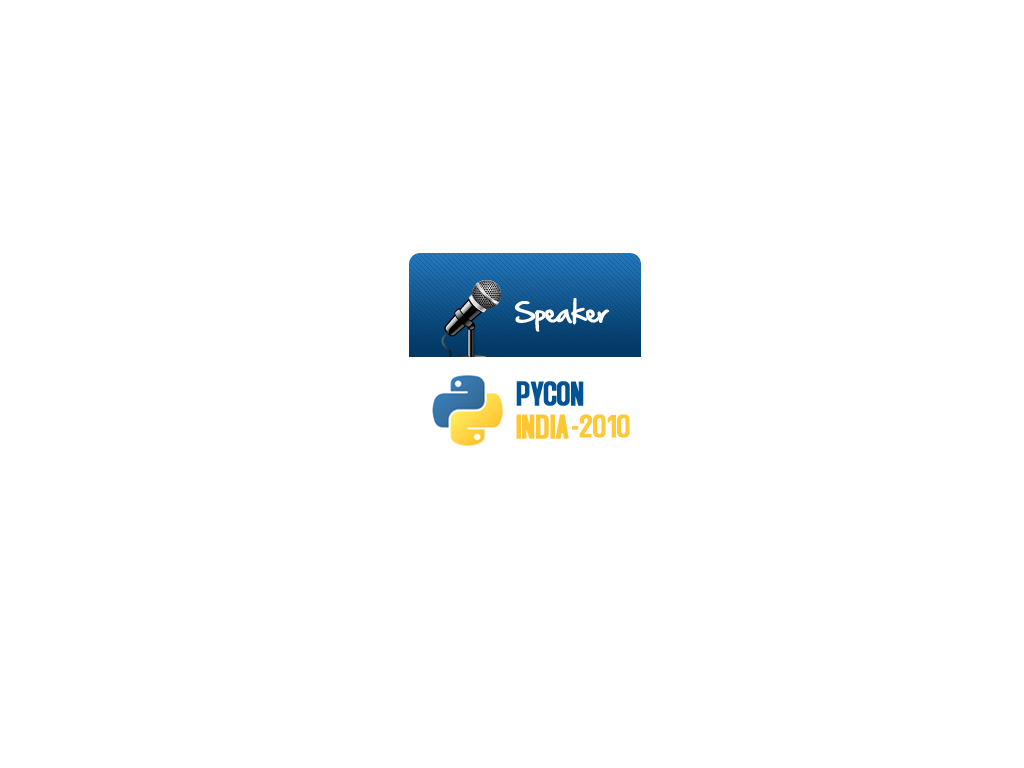
<style>
.page{position:relative;width:1024px;height:768px;background:#ffffff}
.page>*{position:absolute;margin:0}
.t1{font:24px "HandOfSean";letter-spacing:-0.025em;color:#ffffff}
.t2{font:36px "AccidentalPresidency";letter-spacing:-0.025em;color:#025296;text-transform:uppercase;font-weight:bold}
.t3{font:36px "AccidentalPresidency";letter-spacing:-0.025em;color:#ffc634;text-transform:uppercase;font-weight:bold}
.t4{font:36px "AccidentalPresidency";letter-spacing:-0.025em;color:#ffc837;text-transform:uppercase;font-weight:bold}
</style>
<div class="page">
<p class="t1" style="left:514px;top:298px;width:96px;height:34px">Speaker</p>
<p class="t2" style="left:516px;top:381px;width:68px;height:25px">pycon</p>
<p class="t3" style="left:516px;top:414px;width:53px;height:25px">india</p>
<p class="t4" style="left:572px;top:414px;width:58px;height:24px">-2010</p>
</div>
